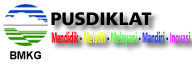
<style>
.page{position:relative;width:192px;height:71px;background:#ffffff}
.page>*{position:absolute;margin:0}
.t1{font:18px "ArticulateExtrabold";color:#020000}
.t2{font:14.8px "ArticulateExtrabold";color:#fe040a;scale:0.37 1}
.t3{font:14.8px "ArticulateExtrabold";color:#020000;scale:0.37 1}
.t4{font:14.8px "ArticulateExtrabold";color:#f2fe2a;scale:0.37 1}
.t5{font:14.8px "ArticulateExtrabold";color:#59fc4d;scale:0.37 1}
.t6{font:14.8px "ArticulateExtrabold";color:#313ff4;scale:0.37 1}
.t7{font:14.8px "ArticulateExtrabold";color:#d52df9;scale:0.37 1}
.t8{font:11px "Arial-BoldMT";color:#020000;scale:0.97 1}
</style>
<div class="page">
<p class="t1" style="left:51px;top:12px;width:101px;height:14px">PUSDIKLAT</p>
<p class="t2" style="left:51px;top:31px;width:139px;height:15px">Mendidik<span class="t3"> - </span><span class="t4">Melatih </span><span class="t3">- </span><span class="t5">Melayani</span><span class="t3"> - </span><span class="t6">Mandiri </span><span class="t3">- </span><span class="t7">Inovasi</span></p>
<p class="t8" style="left:10px;top:51px;width:31px;height:9px">BMKG</p>
</div>
